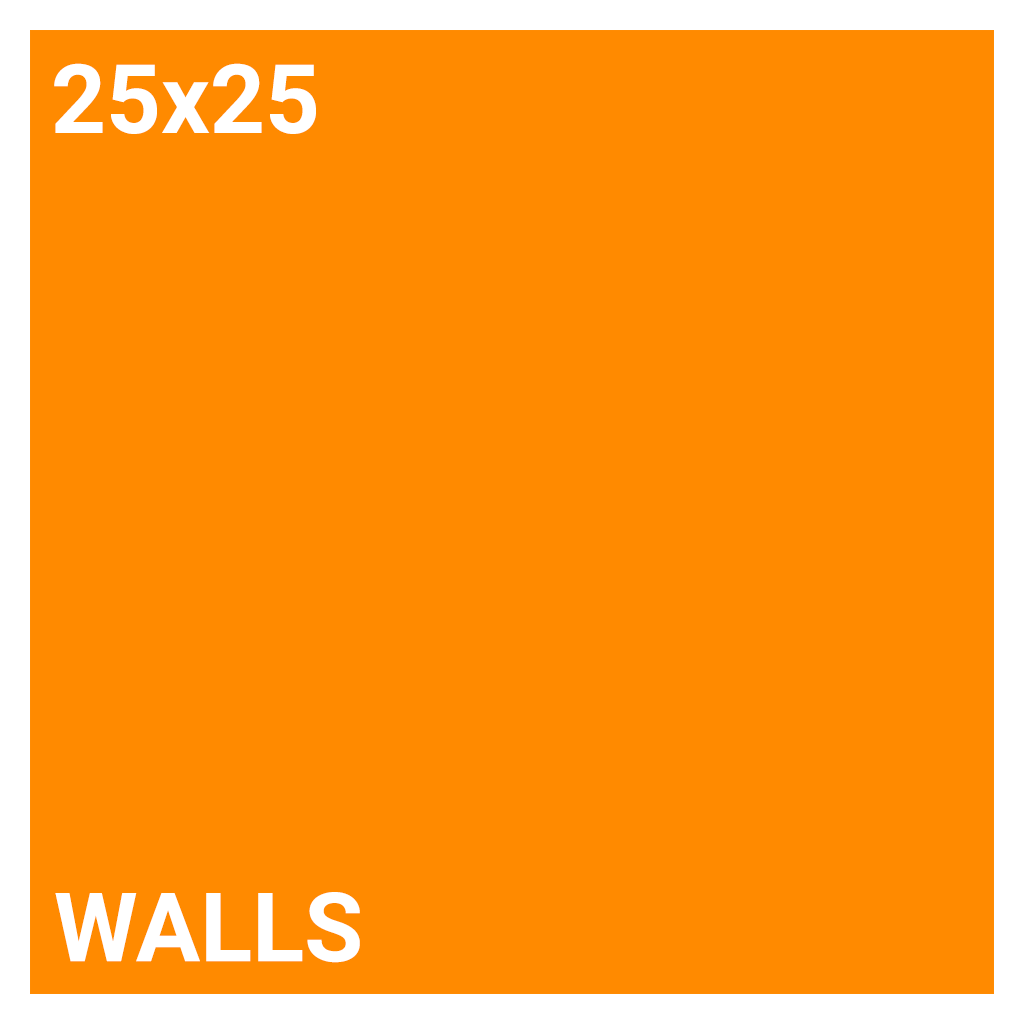
<style>
.page{position:relative;width:1024px;height:1024px;background:#ff8a00}
.page>*{position:absolute;margin:0}
.t1{font:96px "Roboto-Bold";color:#ffffff}
</style>
<div class="page">
<p class="t1" style="left:54px;top:63px;width:262px;height:71px">25x25</p>
<p class="t1" style="left:55px;top:892px;width:305px;height:71px">WALLS</p>
</div>
